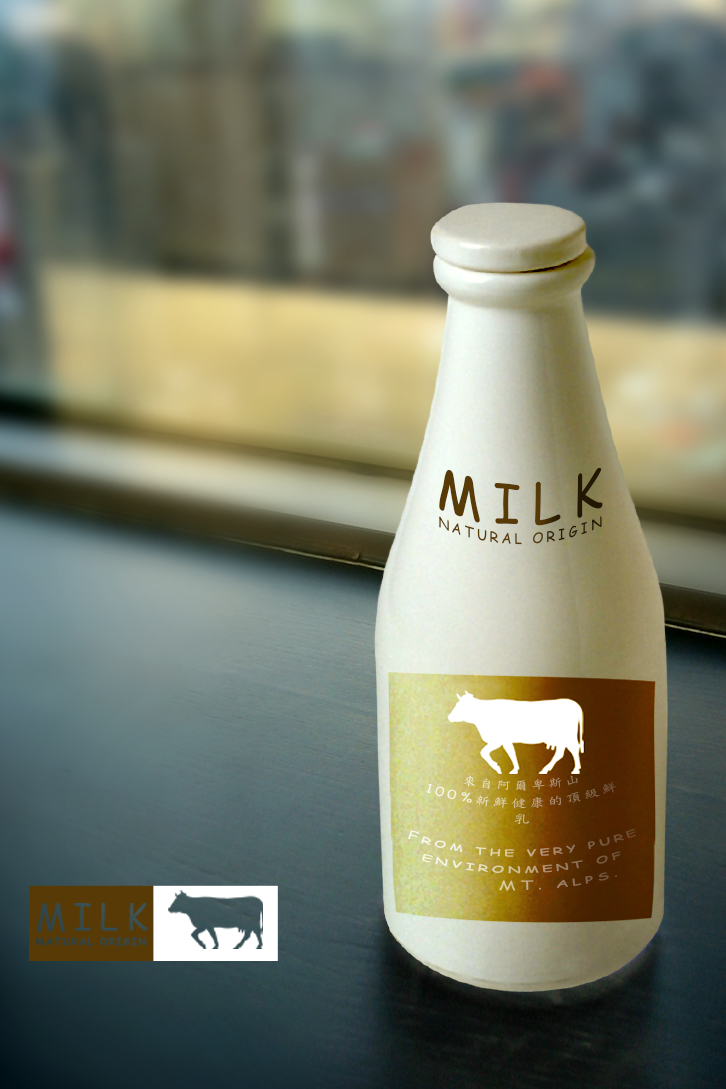
<style>
.page{position:relative;width:726px;height:1089px}
.page>*{position:absolute;margin:0}
.t1{font:14.5px/55.2px "ComicSansMS";letter-spacing:0.2em;color:#583a06;text-transform:uppercase;scale:0.96 1}
.t2{font:54.5px/55.2px "ComicSansMS";letter-spacing:0.2em;color:#583a06;text-transform:uppercase;scale:0.96 1}
.t3{font:12.1px/16.7px "ComicSansMS";letter-spacing:0.2em;font-variant:small-caps}
.t4{font:12.1px/16.7px "DFKaiShu-SB-Estd-BF";letter-spacing:0.2em;font-variant:small-caps}
</style>
<div class="page">
<p class="t1" style="left:439px;top:467px;width:164px;height:78px;text-align:center"><span class="t2">Milk<br></span>Natural Origin</p>
<p class="t3" style="left:408px;top:775px;width:228px;height:116px;text-align:center;rotate:-1deg"><span class="t4">來自阿爾卑斯山</span><br>100%<span class="t4">新鮮健康的頂級鮮乳</span><br><br>From the very pure environment of MT. alps.</p>
</div>
